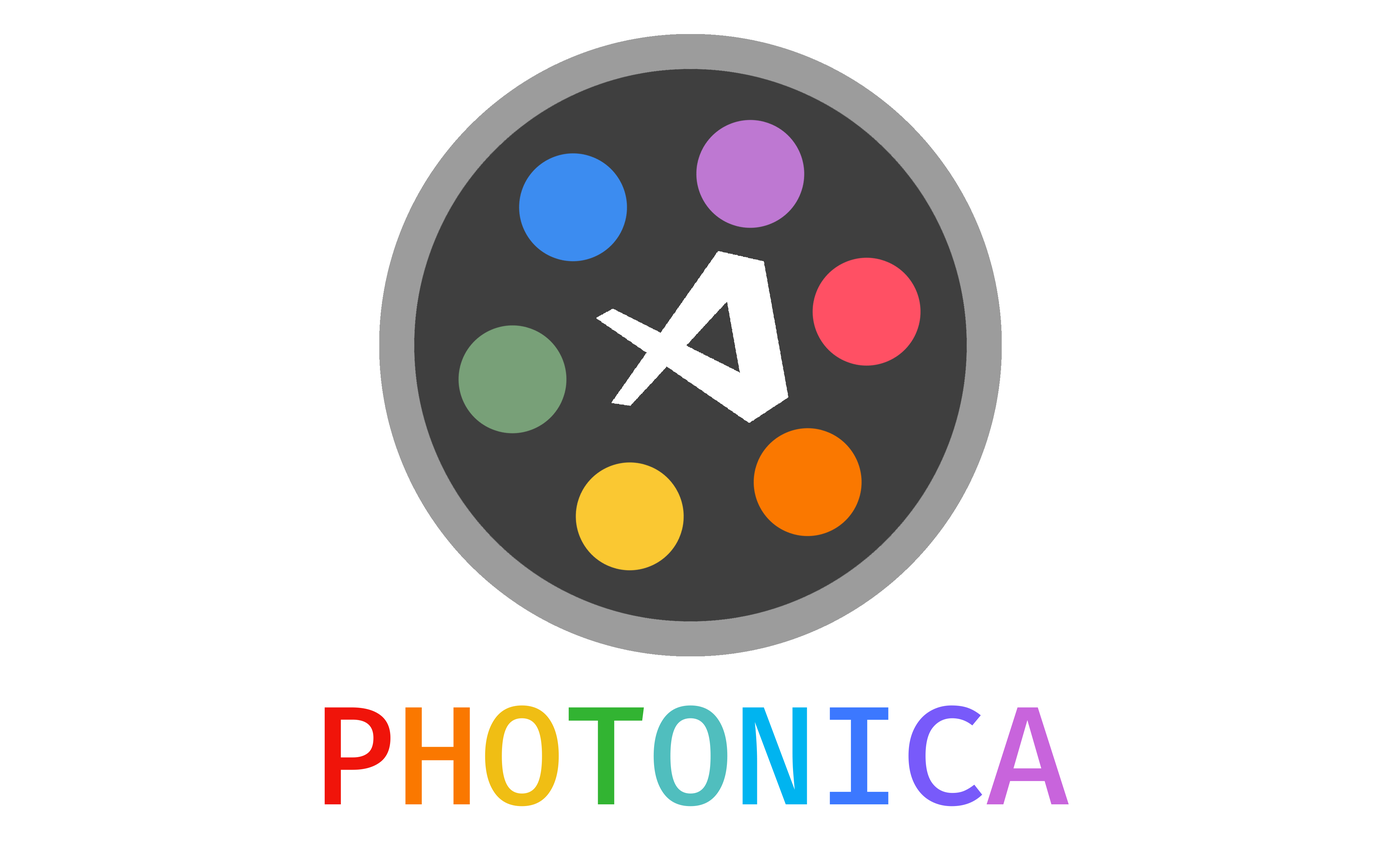
<style>
.page{position:relative;width:1381px;height:863px;background:#ffffff}
.page>*{position:absolute;margin:0}
.t1{font:140.5px "FiraMono-Medium";color:#f0140a}
.t2{font:140.5px "FiraMono-Medium";color:#fa7800}
.t3{font:140.5px "FiraMono-Medium";color:#f0be14}
.t4{font:140.5px "FiraMono-Medium";color:#32b432}
.t5{font:140.5px "FiraMono-Medium";color:#50bebe}
.t6{font:140.5px "FiraMono-Medium";color:#00b4f0}
.t7{font:140.5px "FiraMono-Medium";color:#3c78ff}
.t8{font:140.5px "FiraMono-Medium";color:#785afa}
.t9{font:140.5px "FiraMono-Medium";color:#c864dc}
</style>
<div class="page">
<p class="t1" style="left:325px;top:705px;width:744px;height:102px">P<span class="t2">H</span><span class="t3">O</span><span class="t4">T</span><span class="t5">O</span><span class="t6">N</span><span class="t7">I</span><span class="t8">C</span><span class="t9">A</span></p>
</div>
